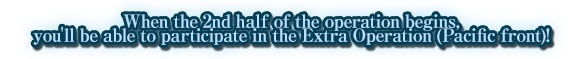
<style>
.page{position:relative;width:586px;height:59px}
.page>*{position:absolute;margin:0}
.t1{font:18px/14px "RyuminPro-ExBold";letter-spacing:-0.04em;color:#b9e0ff}
</style>
<div class="page">
<p class="t1" style="left:33px;top:14px;width:517px;height:31px;text-align:center">When the 2nd half of the operation begins,<br>you'll be able to participate in the Extra Operation (Pacific front)!</p>
</div>
